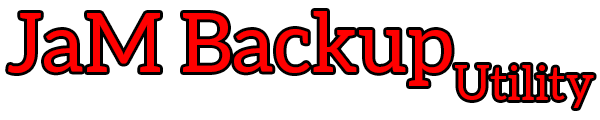
<style>
.page{position:relative;width:600px;height:120px;background:#ffffff}
.page>*{position:absolute;margin:0}
.t1{font:82px "Aleo-Regular";color:#ff0000}
</style>
<div class="page">
<p class="t1" style="left:8px;top:11px;width:586px;height:97px">JaM BackupUtility</p>
</div>
